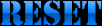
<style>
.page{position:relative;width:102px;height:26px;background:#000000}
.page>*{position:absolute;margin:0}
.t1{font:32px "StencilStd";text-transform:uppercase;scale:0.95 1}
</style>
<div class="page">
<p class="t1" style="left:0px;top:0px;width:102px;height:26px">Reset</p>
</div>
